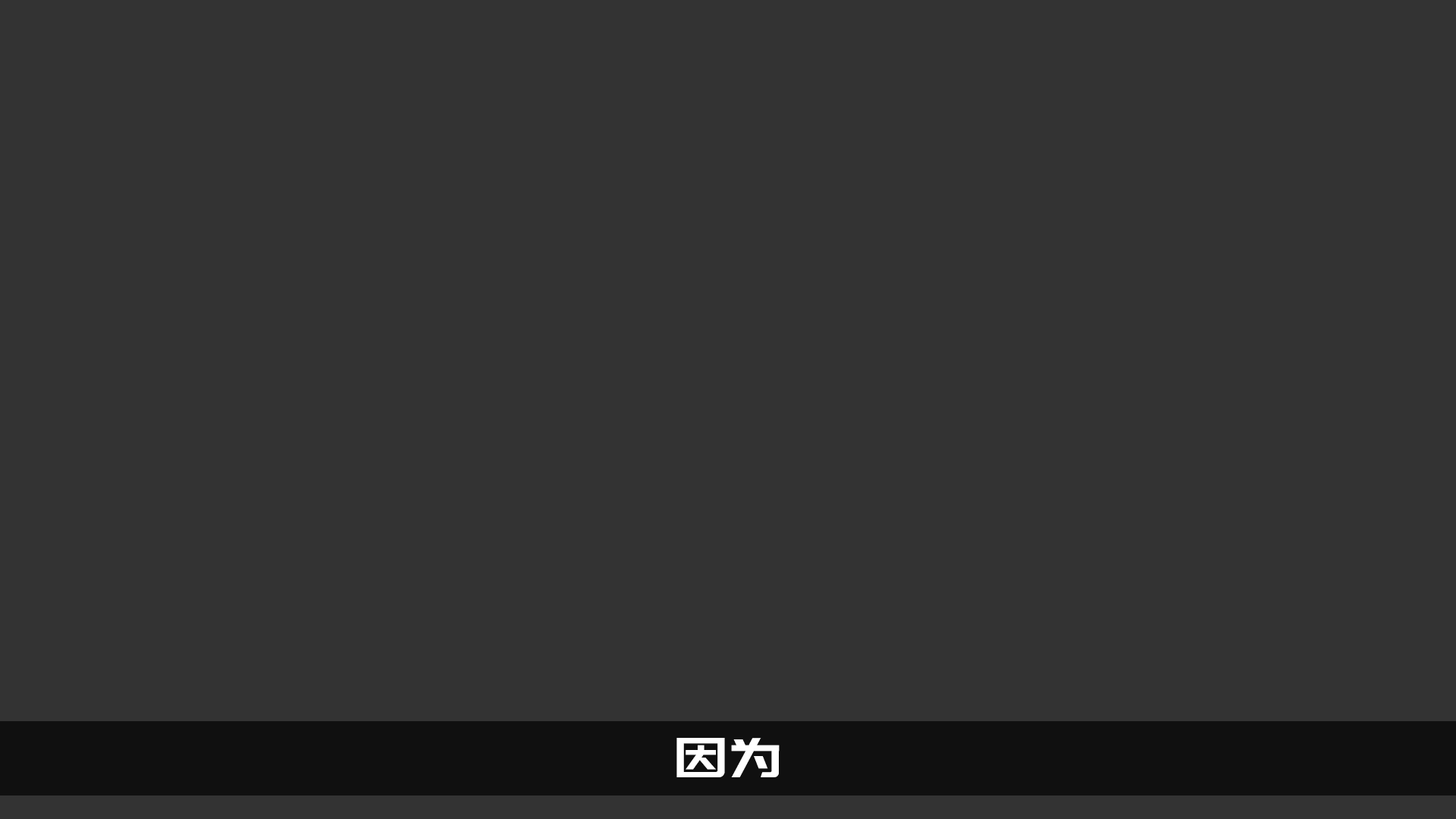
<style>
.page{position:relative;width:1456px;height:819px;background:#333333}
.page>*{position:absolute;margin:0}
.t1{font:54.6px "PangMenZhengDao-3";color:#ffffff}
</style>
<div class="page">
<p class="t1" style="left:676px;top:738px;width:104px;height:39px">因为</p>
</div>
